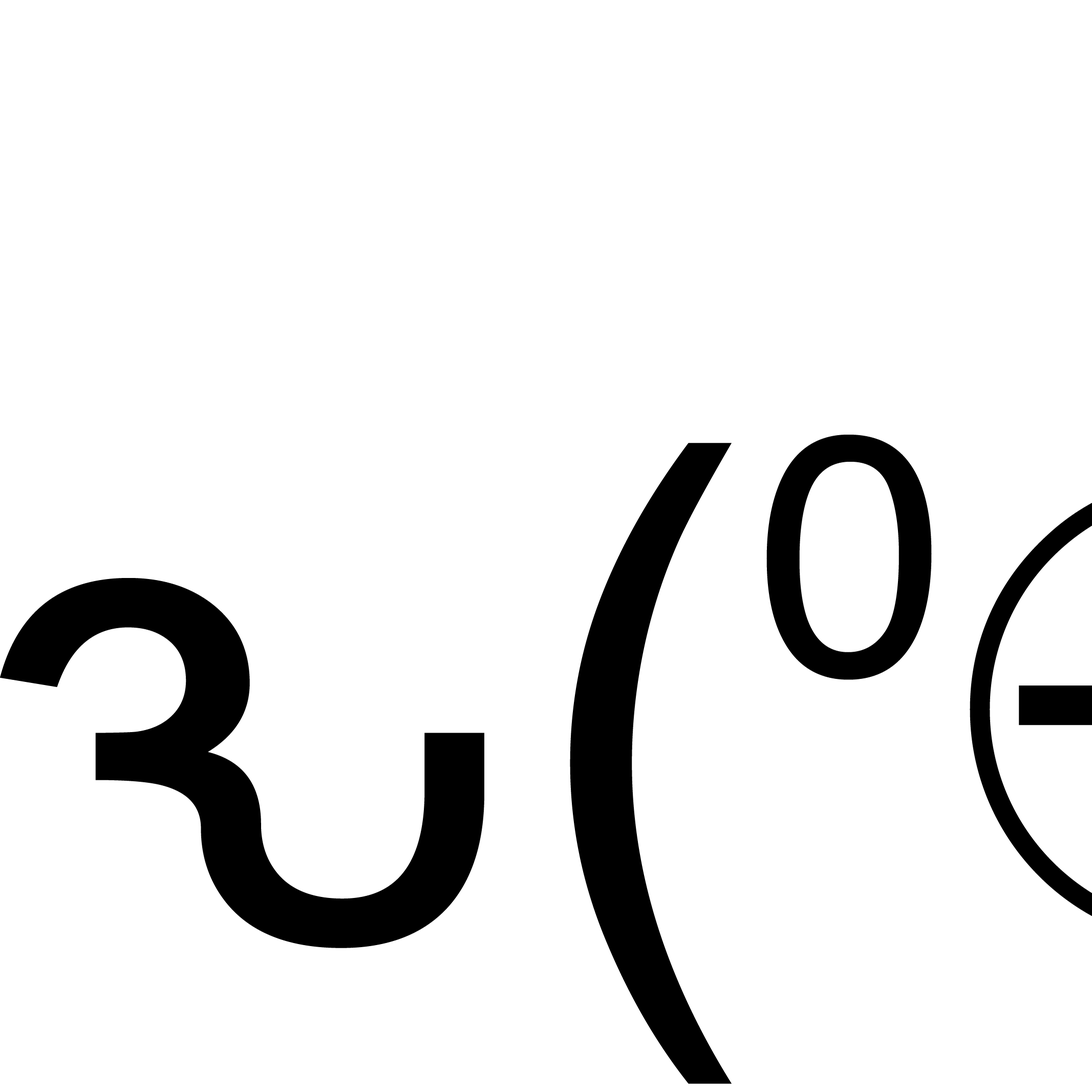
<style>
.page{position:relative;width:1092px;height:1092px;background:#ffffff}
.page>*{position:absolute;margin:0}
.t1{font:682.6px "ArialMT";color:#000000}
.t2{font:682.6px "Helvetica";color:#000000}
</style>
<div class="page">
<p class="t1" style="left:0px;top:435px;width:932px;height:649px">ԅ(<span class="t2">⁰</span></p>
</div>
